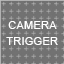
<style>
.page{position:relative;width:64px;height:64px;background:#727272}
.page>*{position:absolute;margin:0}
.t1{font:11px/8px "ArialMT";letter-spacing:0.025em;color:#ffffff}
</style>
<div class="page">
<p class="t1" style="left:6px;top:21px;width:52px;height:24px;text-align:center">CAMERA<br><br>TRIGGER</p>
</div>
